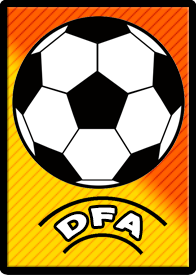
<style>
.page{position:relative;width:196px;height:275px;background:#ffffff}
.page>*{position:absolute;margin:0}
.t1{font:25.8px "BerlinSansFBDemi-Bold";letter-spacing:0.08em;color:#ffffff;scale:1.16 1}
</style>
<div class="page">
<p class="t1" style="left:56px;top:207px;width:84px;height:32px">DFA</p>
</div>
